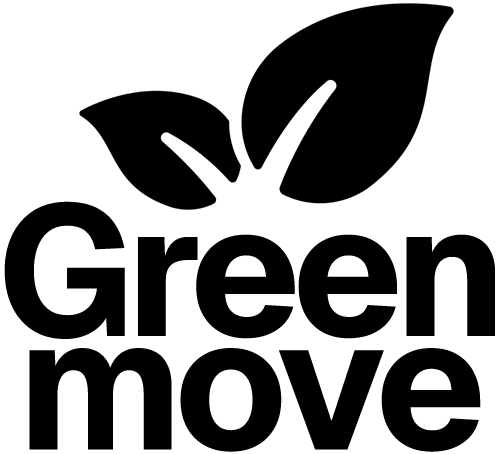
<style>
.page{position:relative;width:500px;height:454px;background:#ffffff}
.page>*{position:absolute;margin:0}
.t1{font:184.6px/113.4px "Geist-Bold";letter-spacing:-0.04em;color:#000000}
</style>
<div class="page">
<p class="t1" style="left:4px;top:201px;width:491px;height:251px;text-align:center">Green<br>move</p>
</div>
